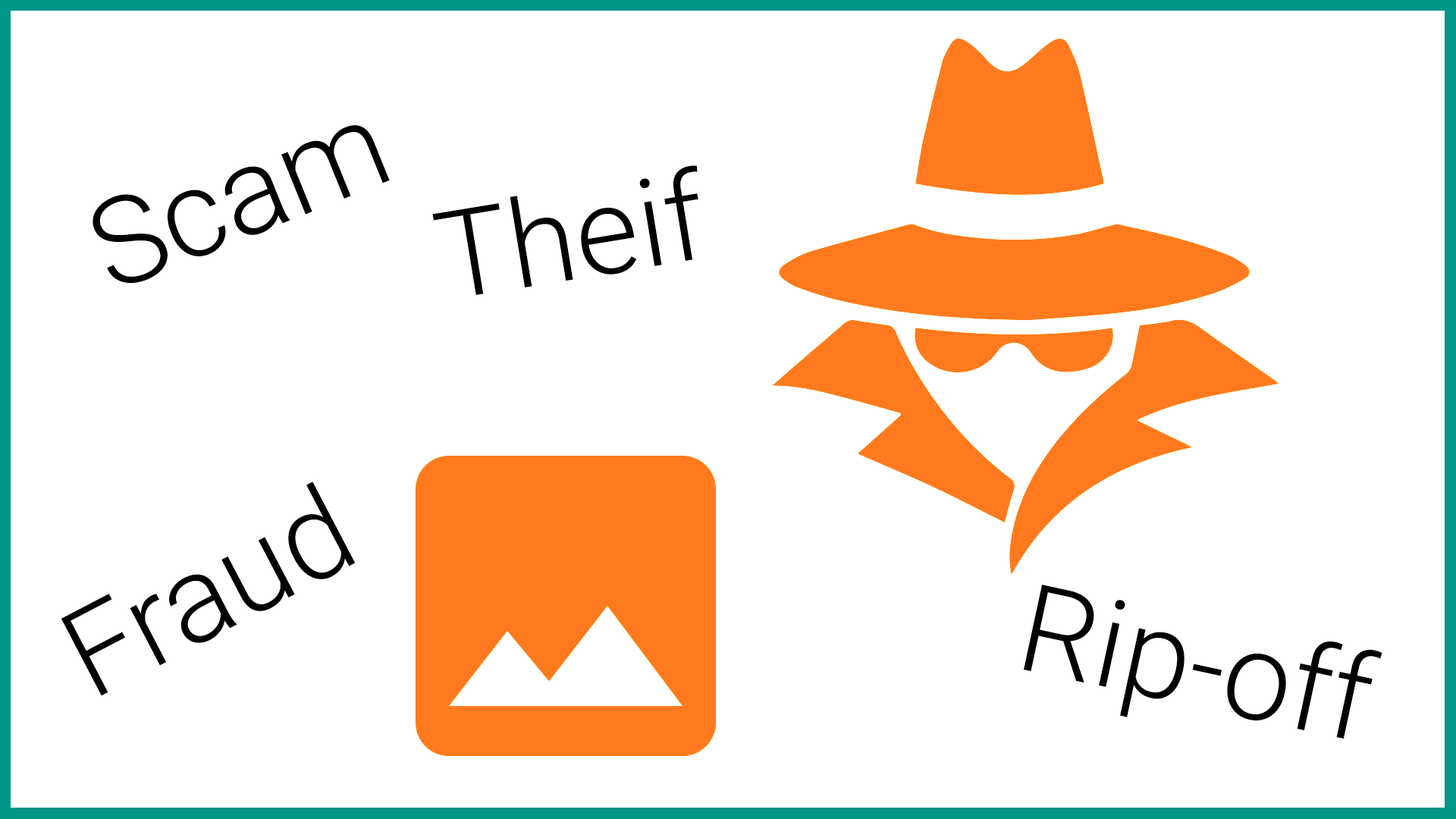
<style>
.page{position:relative;width:1456px;height:819px;background:#ffffff}
.page>*{position:absolute;margin:0}
.t1{font:122.1px "Roboto-Light";color:#000000}
</style>
<div class="page">
<p class="t1" style="left:93px;top:125px;width:297px;height:159px;rotate:-22deg">Scam</p>
<p class="t1" style="left:432px;top:165px;width:266px;height:131px;rotate:-9deg">Theif</p>
<p class="t1" style="left:61px;top:482px;width:295px;height:214px;rotate:-28deg">Fraud</p>
<p class="t1" style="left:1023px;top:585px;width:359px;height:154px;rotate:12deg">Rip-off</p>
</div>
